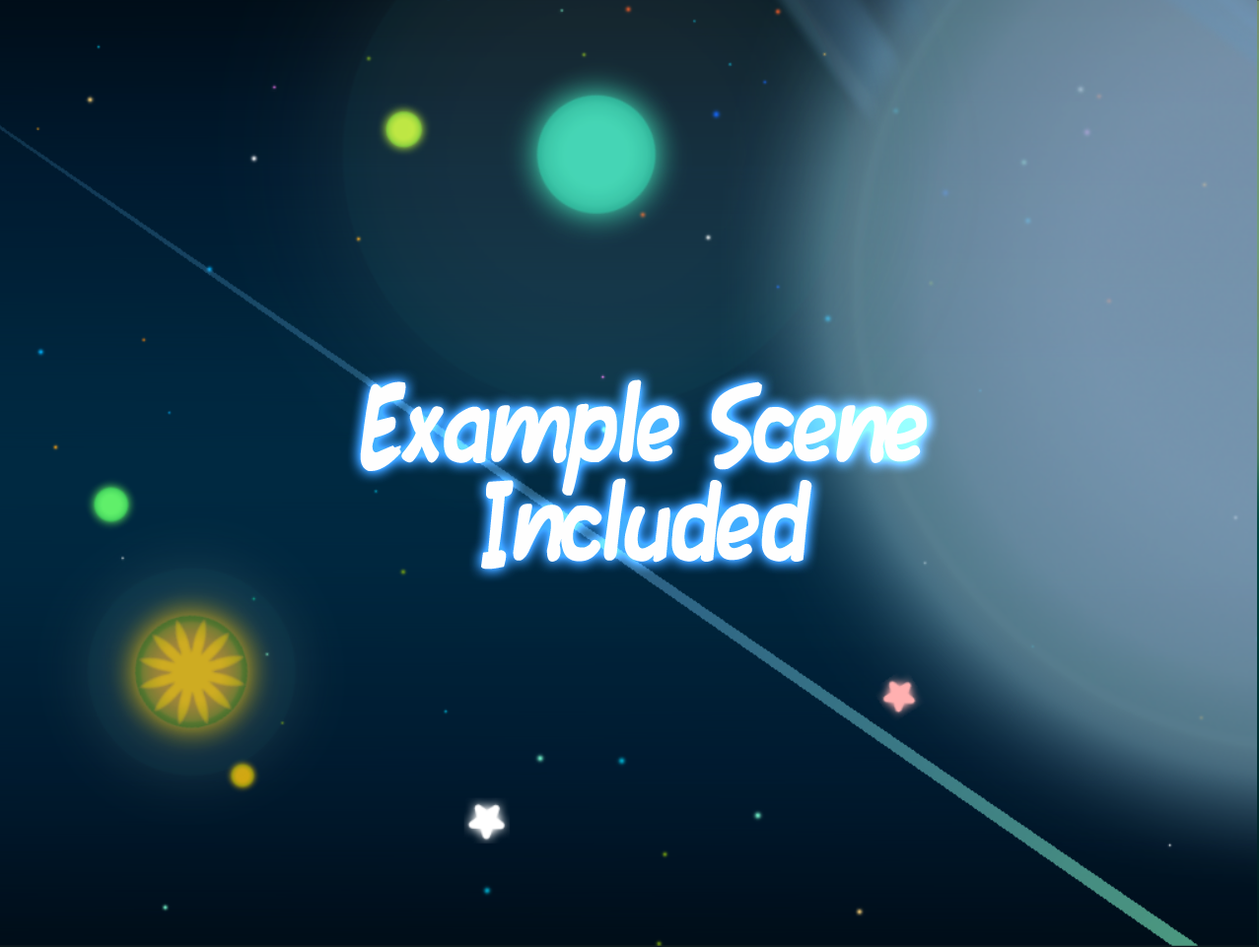
<style>
.page{position:relative;width:1259px;height:947px}
.page>*{position:absolute;margin:0}
.t1{font:131.4px/98.6px "FawnScript";letter-spacing:-0.02em;color:#fefefe}
</style>
<div class="page">
<p class="t1" style="left:360px;top:380px;width:567px;height:190px;text-align:center">Example Scene<br>Included</p>
</div>
